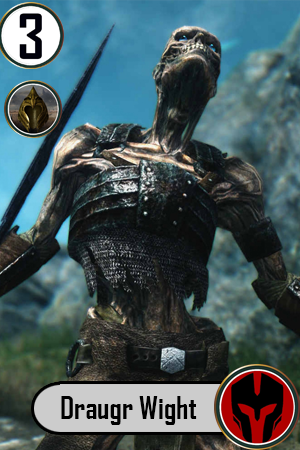
<style>
.page{position:relative;width:300px;height:450px}
.page>*{position:absolute;margin:0}
.t1{font:30px "AgencyFB-Bold";color:#000000}
</style>
<div class="page">
<p class="t1" style="left:61px;top:396px;width:136px;height:29px">Draugr Wight</p>
</div>
